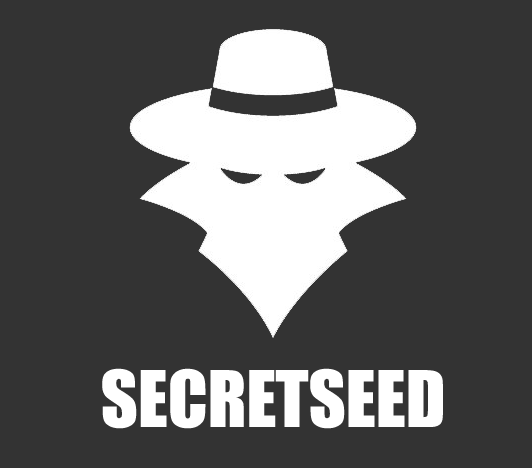
<style>
.page{position:relative;width:532px;height:468px;background:#333333}
.page>*{position:absolute;margin:0}
.t1{font:72px "Impact";color:#ffffff}
</style>
<div class="page">
<p class="t1" style="left:102px;top:368px;width:341px;height:61px">SECRETSEED</p>
</div>
